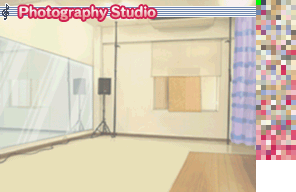
<style>
.page{position:relative;width:296px;height:192px}
.page>*{position:absolute;margin:0}
.t1{font:12px "HummingStd-E";letter-spacing:0.02em}
</style>
<div class="page">
<p class="t1" style="left:19px;top:6px;width:137px;height:14px">Photography Studio</p>
</div>
